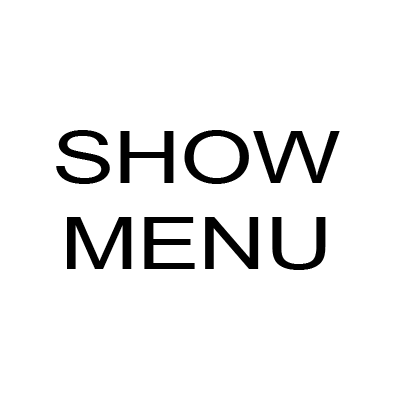
<style>
.page{position:relative;width:400px;height:400px;background:#ffffff}
.page>*{position:absolute;margin:0}
.t1{font:72px "ArialMT";letter-spacing:-0.011em;color:#000000;scale:1.3 1}
</style>
<div class="page">
<p class="t1" style="left:56px;top:130px;width:284px;height:140px;text-align:center">SHOW<br>MENU</p>
</div>
